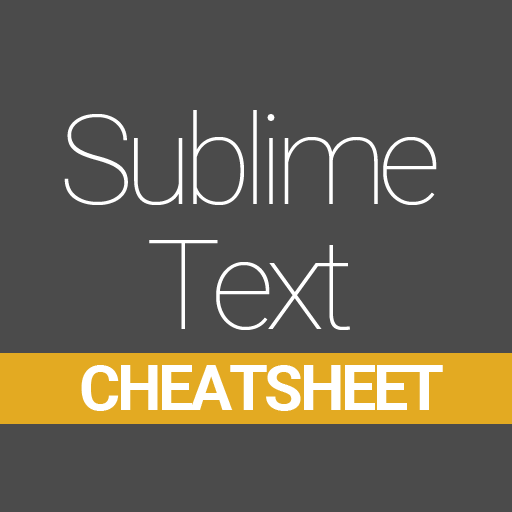
<style>
.page{position:relative;width:512px;height:512px;background:#4b4b4b}
.page>*{position:absolute;margin:0}
.t1{font:125px/125px "Roboto-Thin";letter-spacing:-0.075em;color:#ffffff}
.t2{font:62.5px "Roboto-Bold";letter-spacing:-0.05em;color:#ffffff}
</style>
<div class="page">
<p class="t1" style="left:64px;top:110px;width:373px;height:220px;text-align:center">Sublime<br>Text</p>
<p class="t2" style="left:81px;top:365px;width:362px;height:46px">CHEATSHEET</p>
</div>
